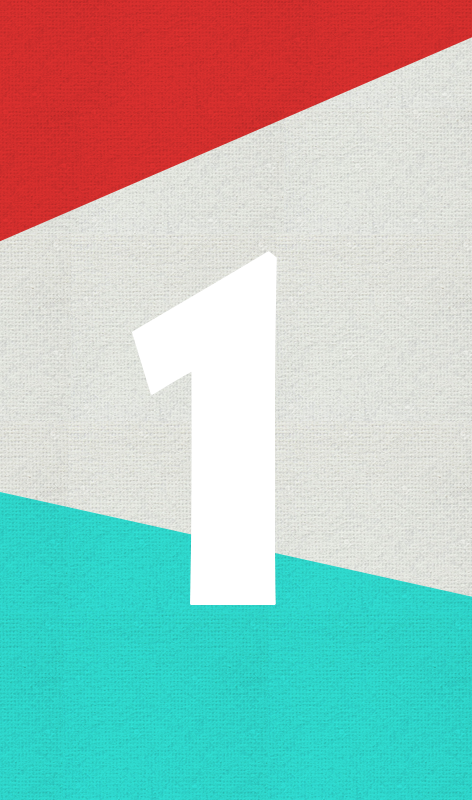
<style>
.page{position:relative;width:472px;height:800px}
.page>*{position:absolute;margin:0}
.t1{font:477.1px "LithosPro-Black";letter-spacing:0.19em;color:#ffffff;font-weight:bold;scale:0.77 1}
</style>
<div class="page">
<p class="t1" style="left:131px;top:251px;width:146px;height:354px">1</p>
</div>
